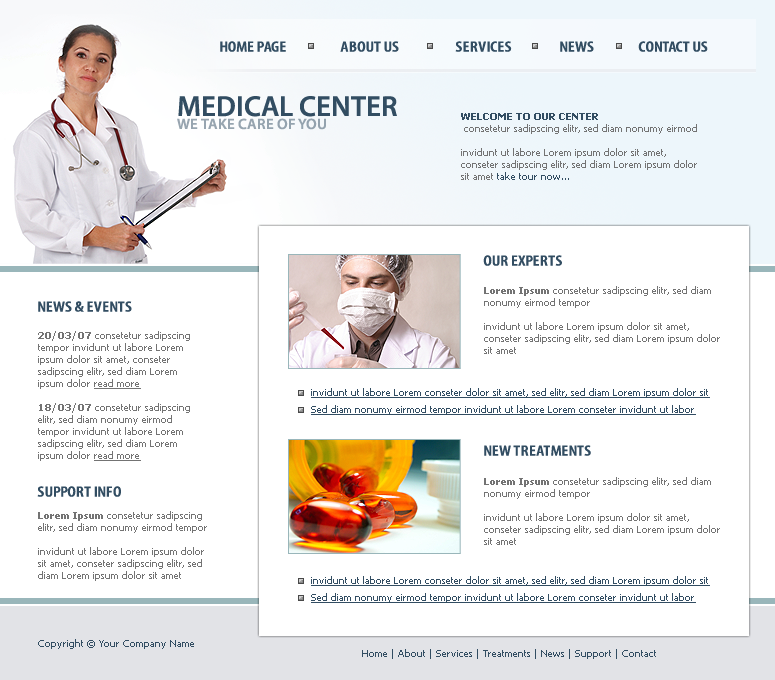
<style>
.page{position:relative;width:775px;height:680px;background:#ffffff}
.page>*{position:absolute;margin:0}
.t1{font:14.9px "MyriadPro-SemiboldCond";color:#324d62;text-transform:uppercase;scale:1.2 1}
.t2{font:29px "MyriadPro-Semibold";color:#324d62;text-transform:uppercase}
.t3{font:10px "Tahoma";color:#737373}
.t4{font:10px "Tahoma-Bold";color:#324d62}
.t5{font:10px "Tahoma";color:#324d62}
.t6{font:15px "MyriadPro-Semibold";color:#97a4af;text-transform:uppercase}
.t7{font:10px "Tahoma-Bold";color:#737373}
.t8{font:10px "Tahoma";color:#737373;text-decoration:underline}
.t9{font:10px/16.3px "Tahoma";color:#324d62;text-decoration:underline}
</style>
<div class="page">
<p class="t1" style="left:220px;top:41px;width:66px;height:11px">HOME PAGE</p>
<p class="t1" style="left:340px;top:41px;width:59px;height:11px">ABOUT US</p>
<p class="t1" style="left:455px;top:41px;width:57px;height:11px">SERVICES</p>
<p class="t1" style="left:560px;top:41px;width:34px;height:11px">NEWS</p>
<p class="t1" style="left:638px;top:41px;width:70px;height:11px">CONTACT US</p>
<p class="t2" style="left:178px;top:96px;width:219px;height:21px">MEDICAL CENTER</p>
<p class="t3" style="left:461px;top:113px;width:236px;height:67px"><span class="t4">WELCOME TO OUR CENTER <br></span> consetetur sadipscing elitr, sed diam nonumy eirmod <br><br>invidunt ut labore Lorem ipsum dolor sit amet, conseter sadipscing elitr, sed diam Lorem ipsum dolor sit amet <span class="t5">take tour now...</span></p>
<p class="t6" style="left:177px;top:118px;width:149px;height:12px">WE TAKE CARE OF YOU</p>
<p class="t1" style="left:483px;top:255px;width:79px;height:11px">OUR EXPERTS</p>
<p class="t3" style="left:484px;top:286px;width:236px;height:68px"><span class="t7">Lorem Ipsum</span> consetetur sadipscing elitr, sed diam nonumy eirmod tempor <br><br>invidunt ut labore Lorem ipsum dolor sit amet, conseter sadipscing elitr, sed diam Lorem ipsum dolor sit amet</p>
<p class="t1" style="left:38px;top:301px;width:94px;height:11px">NEWS &amp; EVENTS</p>
<p class="t3" style="left:38px;top:331px;width:152px;height:130px"><span class="t7">20/03/07</span> consetetur sadipscing tempor invidunt ut labore Lorem ipsum dolor sit amet, conseter sadipscing elitr, sed diam Lorem ipsum dolor <span class="t8">read more<br><br></span><span class="t7">18/03/07</span> consetetur sadipscing elitr, sed diam nonumy eirmod tempor invidunt ut labore Lorem sadipscing elitr, sed diam Lorem ipsum dolor <span class="t8">read more</span></p>
<p class="t9" style="left:311px;top:388px;width:399px;height:27px">invidunt ut labore Lorem conseter dolor sit amet, sed elitr, sed diam Lorem ipsum dolor sit Sed diam nonumy eirmod tempor invidunt ut labore Lorem conseter invidunt ut labor</p>
<p class="t1" style="left:484px;top:445px;width:107px;height:11px">NEW TREATMENTS</p>
<p class="t1" style="left:37px;top:486px;width:84px;height:11px">SUPPORT INFO</p>
<p class="t3" style="left:484px;top:477px;width:236px;height:68px"><span class="t7">Lorem Ipsum</span> consetetur sadipscing elitr, sed diam nonumy eirmod tempor <br><br>invidunt ut labore Lorem ipsum dolor sit amet, conseter sadipscing elitr, sed diam Lorem ipsum dolor sit amet</p>
<p class="t3" style="left:38px;top:511px;width:169px;height:70px"><span class="t7">Lorem Ipsum</span> consetetur sadipscing elitr, sed diam nonumy eirmod tempor <br><br>invidunt ut labore Lorem ipsum dolor sit amet, conseter sadipscing elitr, sed diam Lorem ipsum dolor sit amet</p>
<p class="t9" style="left:311px;top:576px;width:399px;height:27px">invidunt ut labore Lorem conseter dolor sit amet, sed elitr, sed diam Lorem ipsum dolor sit Sed diam nonumy eirmod tempor invidunt ut labore Lorem conseter invidunt ut labor</p>
<p class="t5" style="left:38px;top:639px;width:156px;height:10px">Copyright © Your Company Name</p>
<p class="t5" style="left:362px;top:649px;width:294px;height:10px">Home | About | Services | Treatments | News | Support | Contact</p>
</div>
